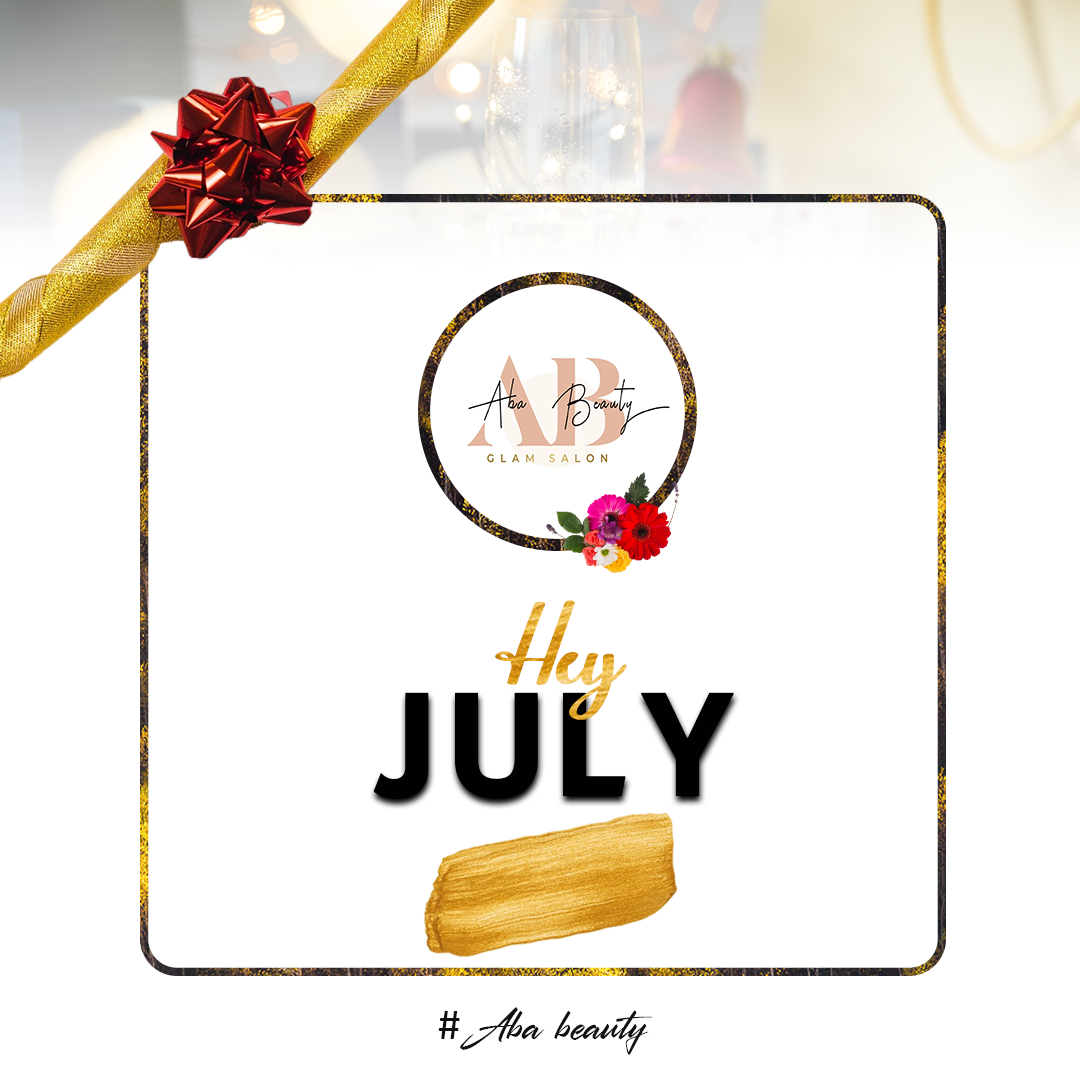
<style>
.page{position:relative;width:1080px;height:1080px;background:#ffffff}
.page>*{position:absolute;margin:0}
.t1{font:130.9px "BeautifulScript-script"}
.t2{font:171.7px "RTDyansSans";color:#010101}
.t3{font:45px "Barett-Street";color:#000000}
.t4{font:45px "Calibri";color:#000000}
</style>
<div class="page">
<p class="t1" style="left:495px;top:600px;width:132px;height:120px">Hey</p>
<p class="t2" style="left:373px;top:692px;width:361px;height:107px">JULY</p>
<p class="t3" style="left:438px;top:1007px;width:215px;height:48px"><span class="t4">#</span>Aba beauty</p>
</div>
